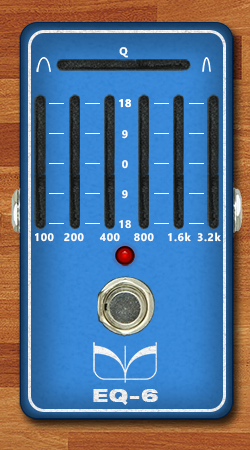
<style>
.page{position:relative;width:250px;height:450px}
.page>*{position:absolute;margin:0}
.t1{font:11px "KhmerUI-Bold";letter-spacing:0.06em;color:#ffffff}
.t2{font:18.3px "HelveticaNeueLT-BlackExt";letter-spacing:0.06em;color:#ffffff}
</style>
<div class="page">
<p class="t1" style="left:119px;top:47px;width:9px;height:11px">Q</p>
<p class="t1" style="left:119px;top:99px;width:12px;height:9px">18</p>
<p class="t1" style="left:119px;top:99px;width:12px;height:9px">18</p>
<p class="t1" style="left:122px;top:130px;width:6px;height:9px">9</p>
<p class="t1" style="left:122px;top:160px;width:6px;height:9px">0</p>
<p class="t1" style="left:122px;top:190px;width:6px;height:9px">9</p>
<p class="t1" style="left:119px;top:220px;width:12px;height:9px">18</p>
<p class="t1" style="left:35px;top:233px;width:19px;height:9px">100</p>
<p class="t1" style="left:64px;top:233px;width:20px;height:9px">200</p>
<p class="t1" style="left:99px;top:233px;width:21px;height:9px">400</p>
<p class="t1" style="left:134px;top:233px;width:20px;height:9px">800</p>
<p class="t1" style="left:168px;top:232px;width:23px;height:10px">1.6k</p>
<p class="t1" style="left:197px;top:232px;width:24px;height:10px">3.2k</p>
<p class="t2" style="left:93px;top:389px;width:65px;height:16px">EQ-6</p>
</div>
